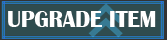
<style>
.page{position:relative;width:167px;height:40px;background:#2f4c4f}
.page>*{position:absolute;margin:0}
.t1{font:24px "BritannicBold";color:#ffffff;scale:0.94 1}
</style>
<div class="page">
<p class="t1" style="left:8px;top:11px;width:148px;height:16px">UPGRADE ITEM</p>
</div>
